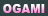
<style>
.page{position:relative;width:48px;height:16px;background:#314242}
.page>*{position:absolute;margin:0}
.t1{font:11.7px "Arial-Black";scale:0.96 1}
</style>
<div class="page">
<p class="t1" style="left:3px;top:4px;width:42px;height:9px">OGAMI</p>
</div>
